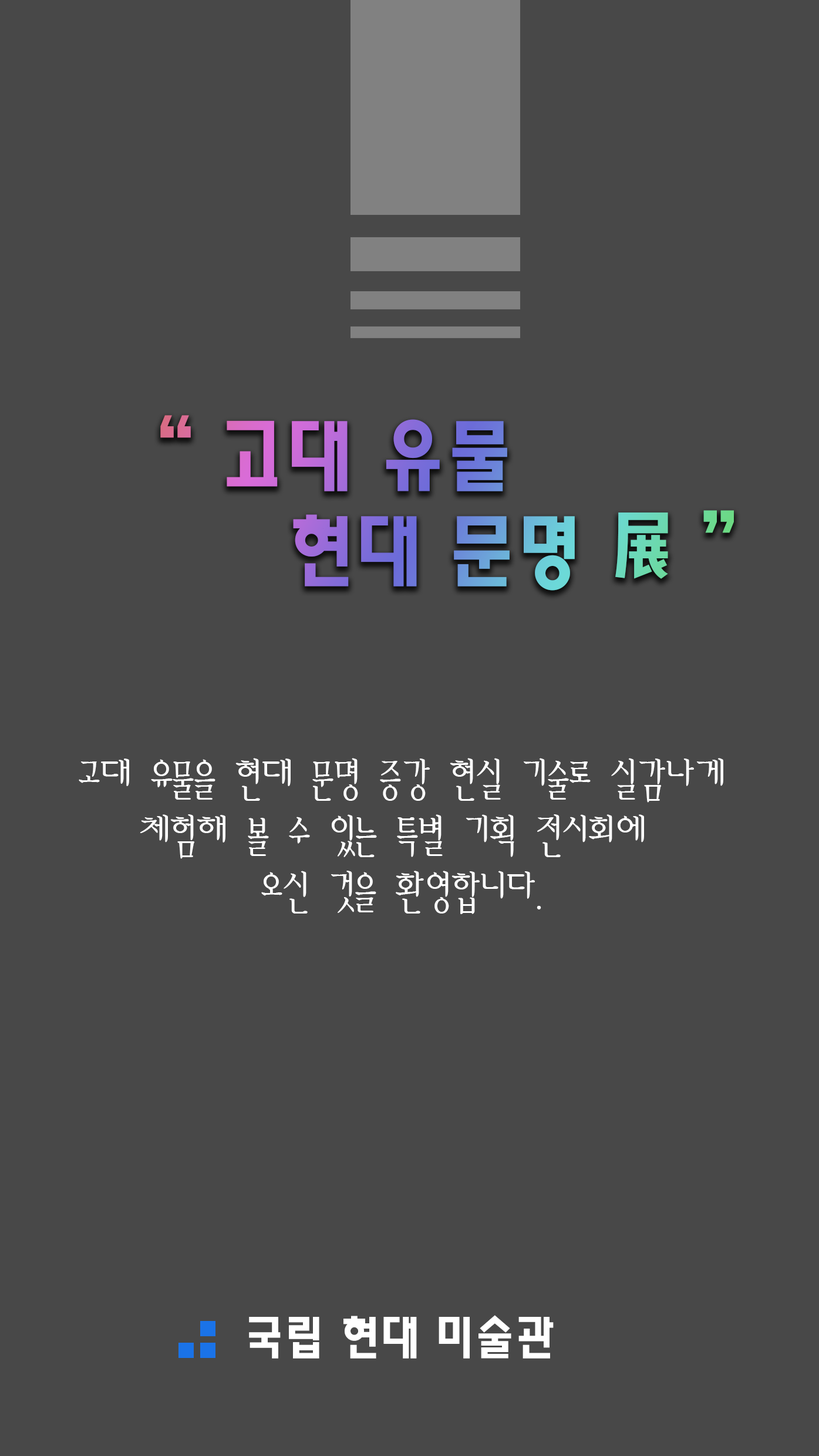
<style>
.page{position:relative;width:819px;height:1456px;background:#484848}
.page>*{position:absolute;margin:0}
.t1{font:79.2px "HaanYHeadM"}
.t2{font:47px "AmiR-HM";color:#ffffff}
.t3{font:47px "HaanYHeadM";color:#ffffff}
</style>
<div class="page">
<p class="t1" style="left:160px;top:415px;width:574px;height:176px">“ 고대 유물 <br>     현대 문명 展 ”</p>
<p class="t2" style="left:79px;top:758px;width:644px;height:156px;text-align:center">고대 유물을 현대 문명 증강 현실 기술로 실감나게<br>체험해 볼 수 있는 특별 기획 전시회에 <br>오신 것을 환영합니다.</p>
<p class="t3" style="left:249px;top:1315px;width:305px;height:44px">국립 현대 미술관</p>
</div>
